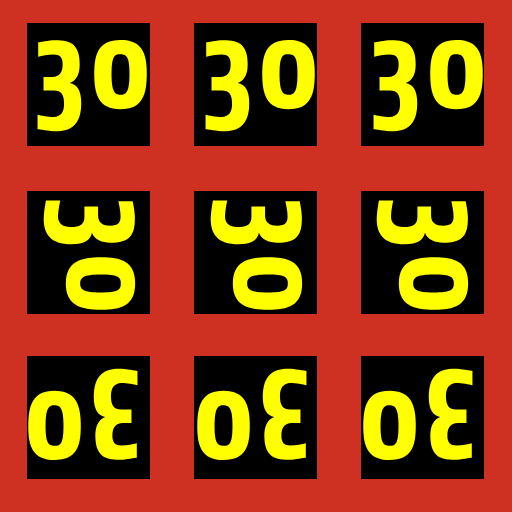
<style>
.page{position:relative;width:512px;height:512px;background:#ce3122}
.page>*{position:absolute;margin:0}
.t1{font:130px "Share-BoldOSF";color:#ffff00}
</style>
<div class="page">
<p class="t1" style="left:37px;top:39px;width:110px;height:93px">30</p>
<p class="t1" style="left:205px;top:39px;width:110px;height:93px">30</p>
<p class="t1" style="left:373px;top:39px;width:110px;height:93px">30</p>
<p class="t1" style="left:43px;top:200px;width:93px;height:110px;rotate:90deg">30</p>
<p class="t1" style="left:210px;top:200px;width:93px;height:110px;rotate:90deg">30</p>
<p class="t1" style="left:376px;top:200px;width:93px;height:110px;rotate:90deg">30</p>
<p class="t1" style="left:28px;top:368px;width:110px;height:93px;rotate:-180deg">30</p>
<p class="t1" style="left:197px;top:368px;width:110px;height:93px;rotate:-180deg">30</p>
<p class="t1" style="left:363px;top:368px;width:110px;height:93px;rotate:-180deg">30</p>
</div>
